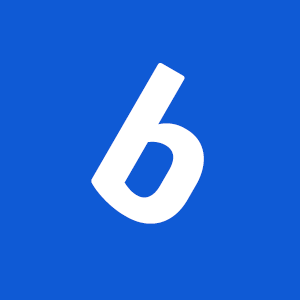
<style>
.page{position:relative;width:300px;height:300px;background:#0f5ad5}
.page>*{position:absolute;margin:0}
.t1{font:200px "Webnar-Bold";color:#ffffff}
</style>
<div class="page">
<p class="t1" style="left:91px;top:63px;width:113px;height:161px;rotate:30deg">b</p>
</div>
